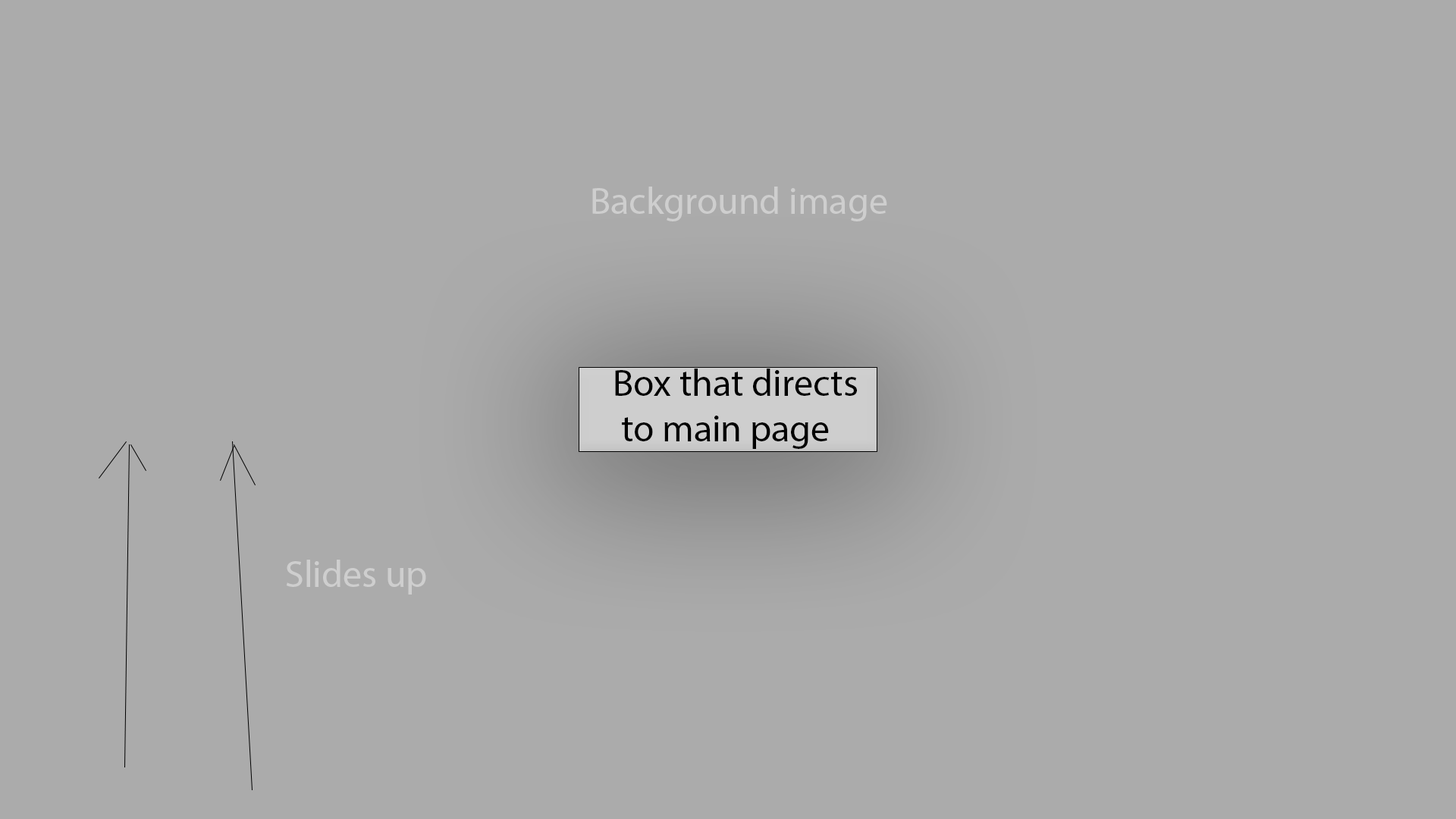
<style>
.page{position:relative;width:1456px;height:819px;background:#ababab}
.page>*{position:absolute;margin:0}
.t1{font:9.1px "MyriadPro-Regular";color:#cecece}
.t2{font:9.1px "MyriadPro-Regular";color:#000000}
</style>
<div class="page">
<p class="t1" style="left:592px;top:187px;width:295px;height:34px">Background image</p>
<p class="t2" style="left:615px;top:369px;width:242px;height:80px">Box that directs<br> to main page</p>
<p class="t1" style="left:286px;top:560px;width:140px;height:35px">Slides up</p>
</div>
